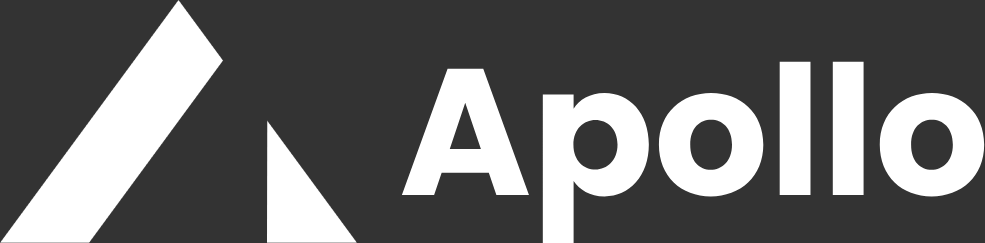
<style>
.page{position:relative;width:985px;height:243px;background:#333333}
.page>*{position:absolute;margin:0}
.t1{font:180px "Poppins-Bold";color:#ffffff}
</style>
<div class="page">
<p class="t1" style="left:401px;top:61px;width:584px;height:182px">Apollo</p>
</div>
